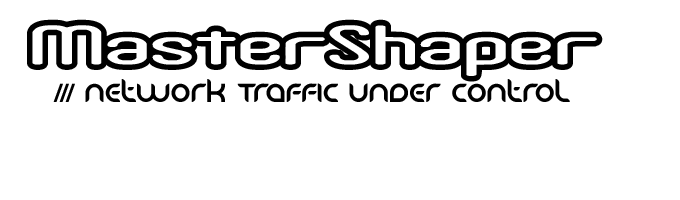
<style>
.page{position:relative;width:680px;height:200px;background:#ffffff}
.page>*{position:absolute;margin:0}
.t1{font:72px "CrackdownO1-BRK-";color:#000000}
.t2{font:23px "Danube";letter-spacing:0.02em;color:#000000;scale:0.97 1}
</style>
<div class="page">
<p class="t1" style="left:27px;top:19px;width:576px;height:63px">MasterShaper</p>
<p class="t2" style="left:53px;top:79px;width:517px;height:23px">/// Network Traffic under control</p>
</div>
